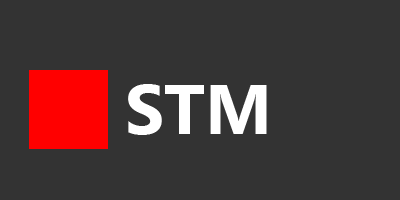
<style>
.page{position:relative;width:400px;height:200px;background:#333333}
.page>*{position:absolute;margin:0}
.t1{font:70px "SegoeUI-Bold";color:#ffffff}
</style>
<div class="page">
<p class="t1" style="left:128px;top:84px;width:139px;height:51px">STM</p>
</div>
